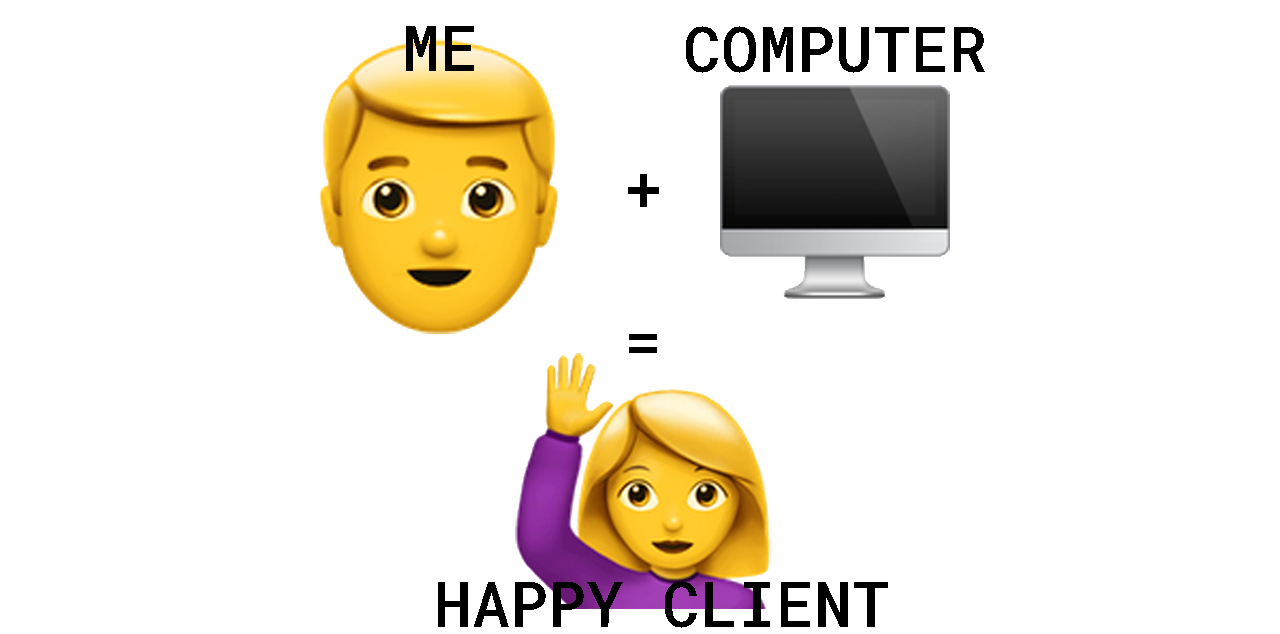
<style>
.page{position:relative;width:1280px;height:634px;background:#ffffff}
.page>*{position:absolute;margin:0}
.t1{font:62.5px "RobotoMono-Medium";color:#000000}
</style>
<div class="page">
<p class="t1" style="left:406px;top:26px;width:68px;height:45px">ME</p>
<p class="t1" style="left:686px;top:26px;width:299px;height:47px">COMPUTER</p>
<p class="t1" style="left:628px;top:174px;width:31px;height:33px">+</p>
<p class="t1" style="left:629px;top:334px;width:28px;height:19px">=</p>
<p class="t1" style="left:438px;top:581px;width:450px;height:47px">HAPPY CLIENT</p>
</div>
